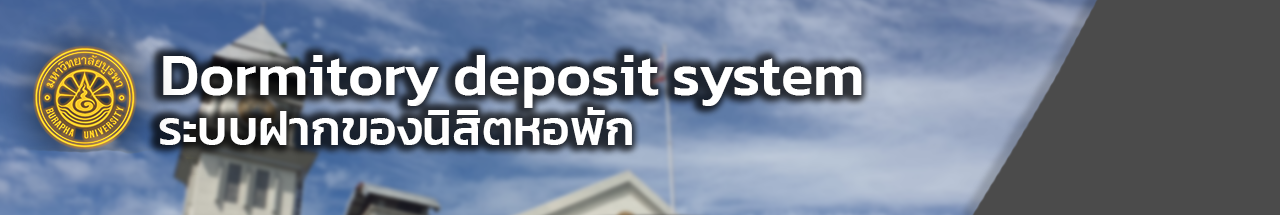
<style>
.page{position:relative;width:1280px;height:215px}
.page>*{position:absolute;margin:0}
.t1{font:60px "Kanit-Medium";color:#ffffff}
.t2{font:48px "Kanit-Medium";color:#ffffff}
</style>
<div class="page">
<p class="t1" style="left:163px;top:55px;width:699px;height:53px">Dormitory deposit system</p>
<p class="t2" style="left:159px;top:107px;width:473px;height:38px">ระบบฝากของนิสิตหอพัก</p>
</div>
